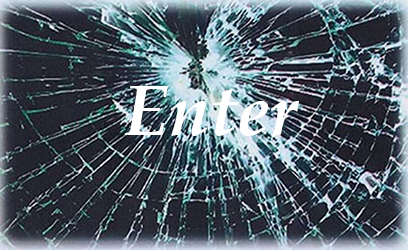
<style>
.page{position:relative;width:408px;height:250px}
.page>*{position:absolute;margin:0}
.t1{font:72.1px "BookAntiqua-BoldItalic";color:#ffffff}
</style>
<div class="page">
<p class="t1" style="left:124px;top:86px;width:175px;height:50px">Enter</p>
</div>
